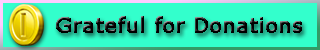
<style>
.page{position:relative;width:320px;height:50px;background:#33ffcc}
.page>*{position:absolute;margin:0}
.t1{font:20px "Verdana";color:#000000;font-weight:bold}
</style>
<div class="page">
<p class="t1" style="left:56px;top:16px;width:246px;height:17px">Grateful for Donations</p>
</div>
